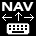
<style>
.page{position:relative;width:36px;height:36px;background:#000000}
.page>*{position:absolute;margin:0}
.t1{font:13px "Swiss721BT-BoldExtended";color:#ffffff}
</style>
<div class="page">
<p class="t1" style="left:2px;top:2px;width:32px;height:9px">NAV</p>
</div>
